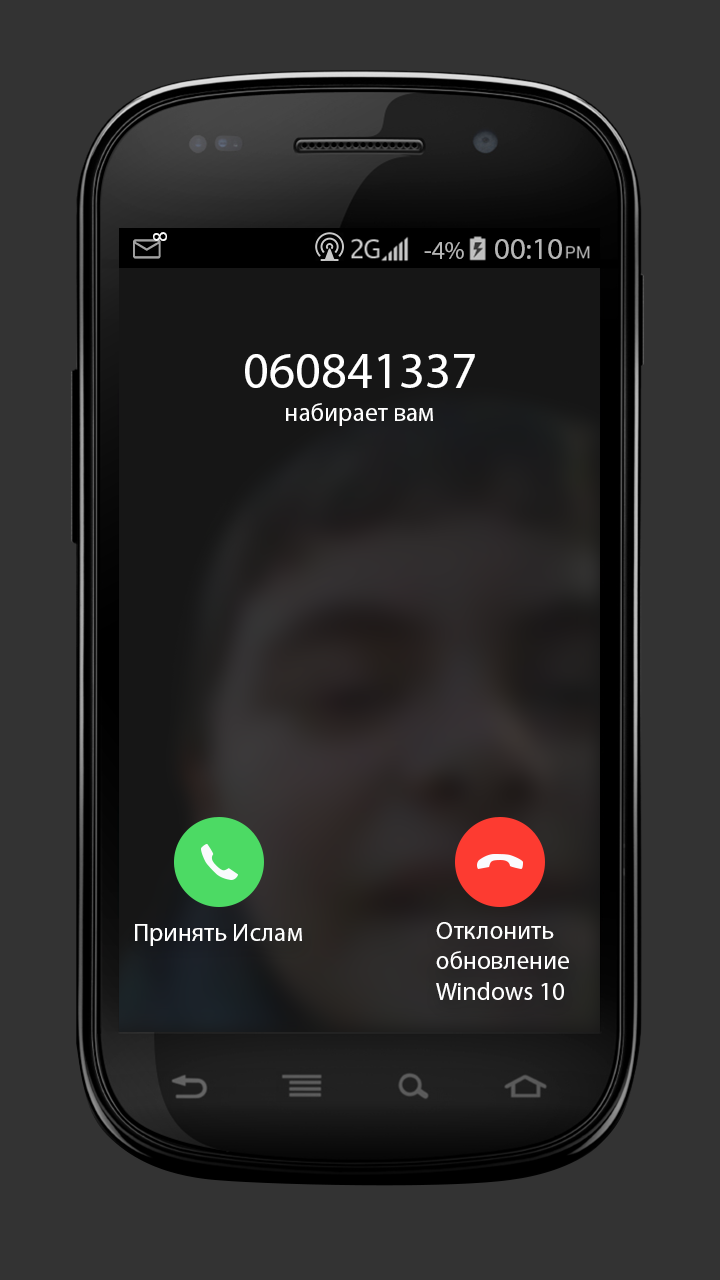
<style>
.page{position:relative;width:720px;height:1280px;background:#333333}
.page>*{position:absolute;margin:0}
.t1{font:20.3px "MyriadPro-Regular";color:#ffffff}
.t2{font:25.4px "MyriadPro-Regular";color:#b6b6b6}
.t3{font:30.5px "MyriadPro-Regular";color:#b6b6b6}
.t4{font:50.8px "MyriadPro-Regular";color:#ffffff}
.t5{font:25.4px "MyriadPro-Regular";color:#ffffff}
</style>
<div class="page">
<p class="t1" style="left:153px;top:232px;width:14px;height:9px;rotate:-90deg">8</p>
<p class="t2" style="left:424px;top:242px;width:40px;height:17px">-4%</p>
<p class="t3" style="left:495px;top:239px;width:67px;height:20px">00:10</p>
<p class="t4" style="left:245px;top:354px;width:230px;height:34px">060841337</p>
<p class="t5" style="left:286px;top:403px;width:147px;height:23px">набирает вам</p>
<p class="t5" style="left:135px;top:924px;width:167px;height:22px">Принять Ислам</p>
<p class="t5" style="left:436px;top:922px;width:133px;height:78px">Отклонить <br>обновление <br>Windows 10</p>
</div>
